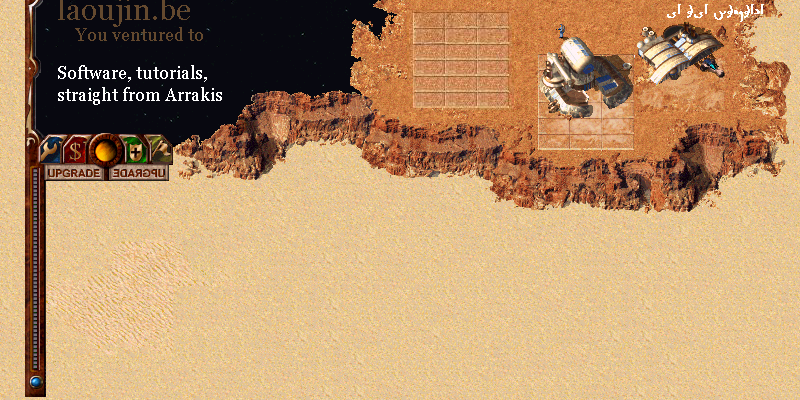
<style>
.page{position:relative;width:800px;height:400px}
.page>*{position:absolute;margin:0}
.t1{font:14px "Fremen";color:#ffffff;font-weight:bold}
.t2{font:18px "Georgia";color:#64492e}
.t3{font:18px "Georgia";color:#ffffff}
</style>
<div class="page">
<p class="t1" style="left:667px;top:4px;width:97px;height:18px">ya hya shouhada</p>
<p class="t2" style="left:75px;top:27px;width:128px;height:14px">You ventured to</p>
<p class="t3" style="left:58px;top:65px;width:164px;height:40px">Software, tutorials,<br>straight from Arrakis</p>
</div>
